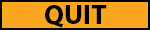
<style>
.page{position:relative;width:150px;height:30px;background:#f9a51f}
.page>*{position:absolute;margin:0}
.t1{font:28px "MyriadPro-Bold";color:#000000}
</style>
<div class="page">
<p class="t1" style="left:45px;top:5px;width:62px;height:23px">QUIT</p>
</div>
